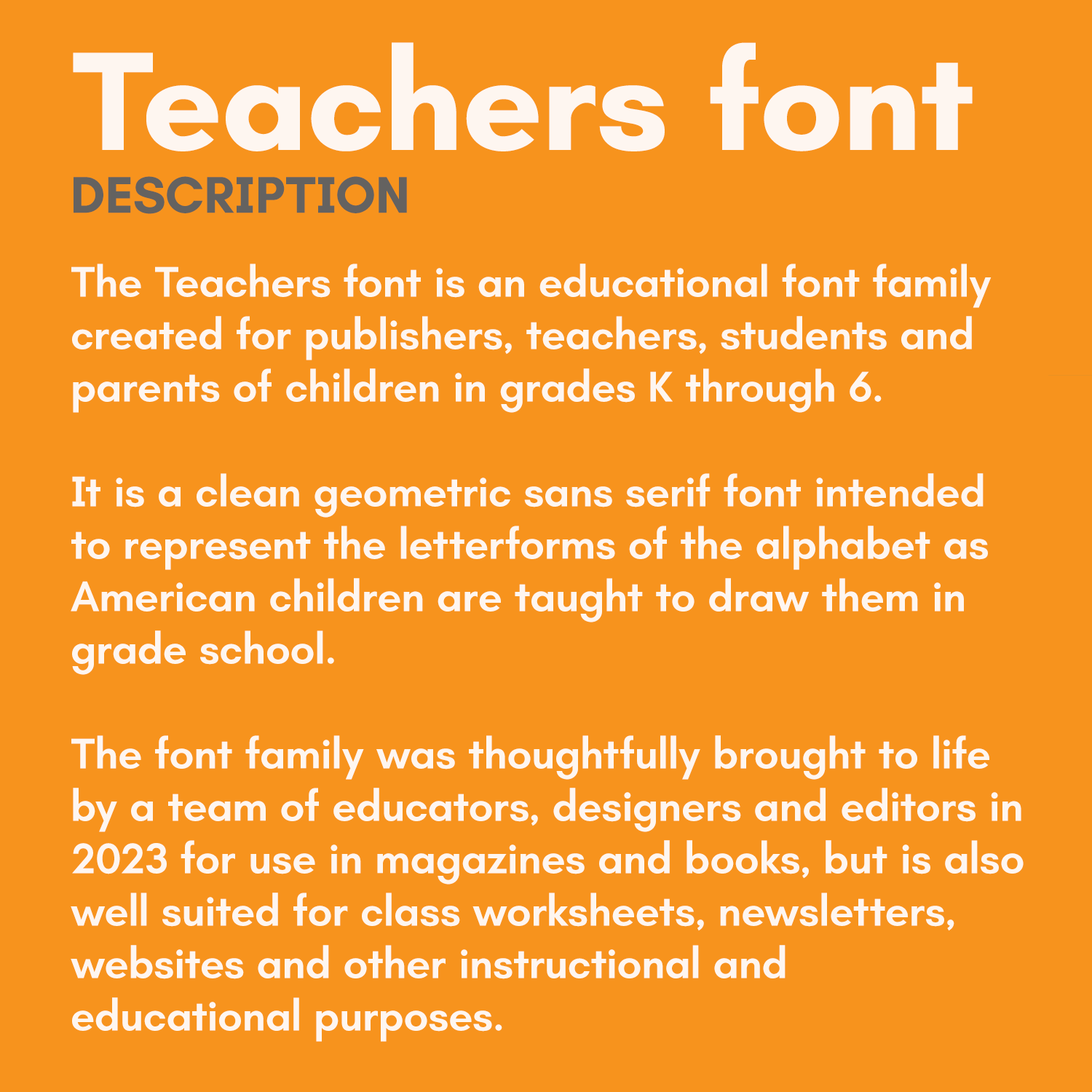
<style>
.page{position:relative;width:1092px;height:1092px;background:#f7931d}
.page>*{position:absolute;margin:0}
.t1{font:43.7px "Teachers-SemiBold";color:#ffffff}
.t2{font:142.7px "Teachers-Bold";color:#ffffff}
.t3{font:52.4px "Teachers-Bold";color:#4c5c66}
</style>
<div class="page">
<p class="t1" style="left:71px;top:42px;width:953px;height:1000px;opacity:0.9"><span class="t2">Teachers font<br></span><span class="t3">DESCRIPTION<br><br></span>The Teachers font is an educational font family <br>created for publishers, teachers, students and <br>parents of children in grades K through 6.<br><br>It is a clean geometric sans serif font intended <br>to represent the letterforms of the alphabet as <br>American children are taught to draw them in <br>grade school. <br><br>The font family was thoughtfully brought to life <br>by a team of educators, designers and editors in <br>2023 for use in magazines and books, but is also <br>well suited for class worksheets, newsletters, <br>websites and other instructional and <br>educational purposes.</p>
</div>
